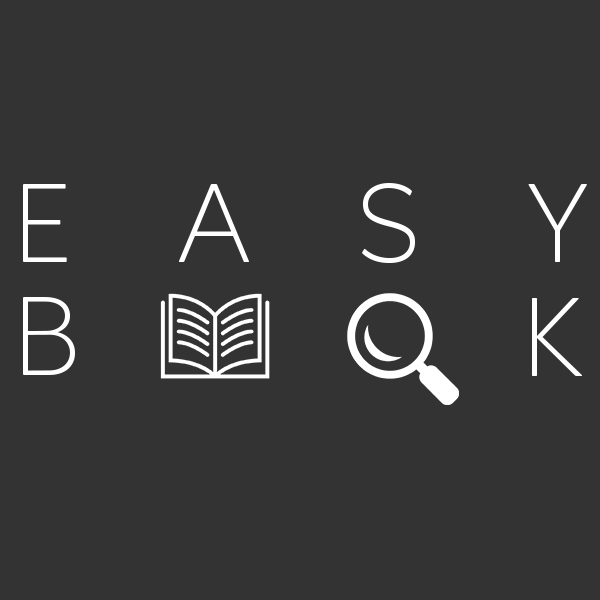
<style>
.page{position:relative;width:600px;height:600px;background:#333333}
.page>*{position:absolute;margin:0}
.t1{font:111.8px "AgeoPersonalUse-Light";letter-spacing:0.95em;color:#ffffff}
.t2{font:111.8px "AgeoPersonalUse-Light";letter-spacing:0.8em;color:#ffffff}
</style>
<div class="page">
<p class="t1" style="left:23px;top:183px;width:564px;height:81px">EASY</p>
<p class="t2" style="left:23px;top:297px;width:52px;height:78px">B</p>
<p class="t2" style="left:532px;top:298px;width:51px;height:78px">K</p>
</div>
